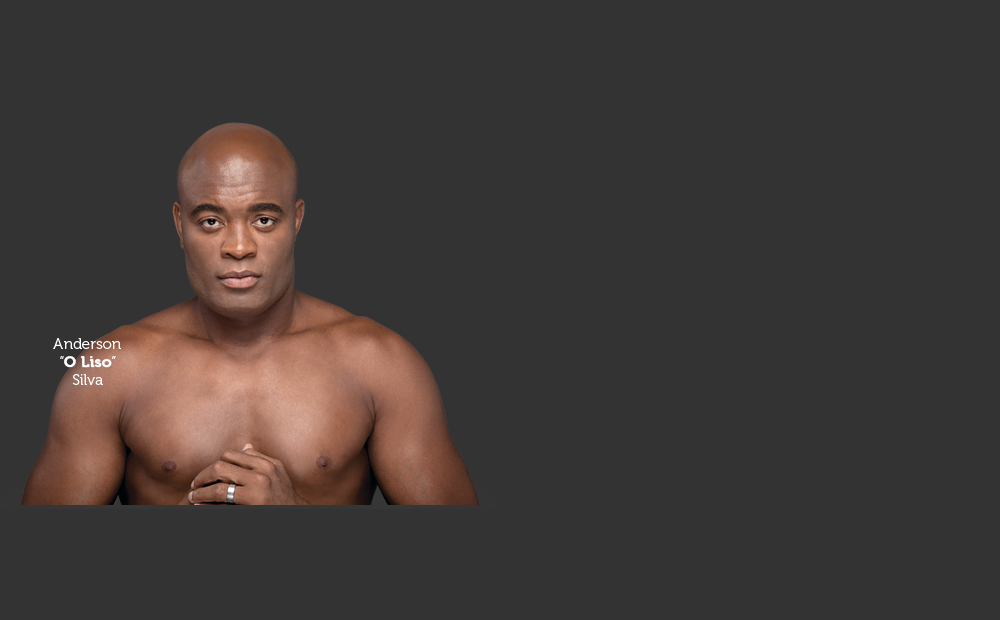
<style>
.page{position:relative;width:1000px;height:620px;background:#333333}
.page>*{position:absolute;margin:0}
.t1{font:15.2px/18.2px "Museo-300";color:#ffffff}
.t2{font:15.2px/18.2px "Museo-700";color:#ffffff;font-weight:bold}
</style>
<div class="page">
<p class="t1" style="left:53px;top:338px;width:68px;height:47px;text-align:center">Anderson<br>“<span class="t2">O Liso</span>”<br>Silva</p>
</div>
